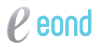
<style>
.page{position:relative;width:100px;height:50px;background:#ffffff}
.page>*{position:absolute;margin:0}
.t1{font:36px "071MKSD-01Medium";letter-spacing:-0.01em;color:#64cce5}
</style>
<div class="page">
<p class="t1" style="left:37px;top:9px;width:55px;height:28px">eond</p>
</div>
